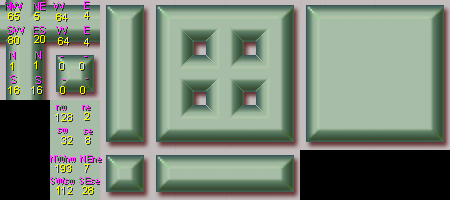
<style>
.page{position:relative;width:450px;height:200px;background:#a8bda8}
.page>*{position:absolute;margin:0}
.t1{font:11px "ArialMT";letter-spacing:-0.01em;color:#ff00fe}
.t2{font:11px "ArialMT";letter-spacing:-0.01em;color:#ff40ff}
.t3{font:11px "ArialMT";letter-spacing:-0.01em;color:#ffff00}
.t4{font:9px "ArialMT";letter-spacing:-0.01em;color:#ff40ff}
</style>
<div class="page">
<p class="t1" style="left:5px;top:2px;width:17px;height:8px">NW</p>
<p class="t2" style="left:33px;top:2px;width:31px;height:8px">NE   W</p>
<p class="t2" style="left:84px;top:1px;width:5px;height:8px">E</p>
<p class="t3" style="left:8px;top:12px;width:11px;height:8px">65</p>
<p class="t3" style="left:34px;top:12px;width:5px;height:8px">5</p>
<p class="t3" style="left:56px;top:13px;width:11px;height:8px">64</p>
<p class="t3" style="left:84px;top:11px;width:5px;height:8px">4</p>
<p class="t2" style="left:7px;top:26px;width:82px;height:8px">SW   ES    W      E</p>
<p class="t3" style="left:8px;top:36px;width:11px;height:8px">80</p>
<p class="t3" style="left:34px;top:35px;width:11px;height:8px">20</p>
<p class="t3" style="left:58px;top:37px;width:11px;height:8px">64</p>
<p class="t3" style="left:84px;top:38px;width:5px;height:8px">4</p>
<p class="t2" style="left:9px;top:51px;width:6px;height:8px">N</p>
<p class="t2" style="left:35px;top:51px;width:6px;height:8px">N</p>
<p class="t3" style="left:10px;top:62px;width:3px;height:8px">1</p>
<p class="t3" style="left:34px;top:61px;width:3px;height:8px">1</p>
<p class="t3" style="left:59px;top:62px;width:25px;height:8px">0     0</p>
<p class="t2" style="left:10px;top:75px;width:6px;height:8px">S</p>
<p class="t2" style="left:35px;top:76px;width:6px;height:8px">S</p>
<p class="t3" style="left:8px;top:86px;width:34px;height:8px">16    16</p>
<p class="t3" style="left:60px;top:86px;width:25px;height:8px">0     0</p>
<p class="t3" style="left:55px;top:113px;width:17px;height:8px">128</p>
<p class="t4" style="left:56px;top:105px;width:10px;height:5px">nw</p>
<p class="t4" style="left:82px;top:105px;width:8px;height:5px">ne</p>
<p class="t3" style="left:84px;top:112px;width:5px;height:8px">2</p>
<p class="t4" style="left:57px;top:128px;width:10px;height:5px">sw</p>
<p class="t3" style="left:61px;top:136px;width:11px;height:8px">32</p>
<p class="t4" style="left:83px;top:129px;width:9px;height:5px">se</p>
<p class="t3" style="left:85px;top:136px;width:5px;height:8px">8</p>
<p class="t4" style="left:50px;top:155px;width:51px;height:7px">NWnw NEne</p>
<p class="t3" style="left:55px;top:164px;width:34px;height:8px">193    7</p>
<p class="t4" style="left:50px;top:177px;width:49px;height:7px">SWsw SEse</p>
<p class="t3" style="left:56px;top:186px;width:37px;height:8px">112   28</p>
</div>
